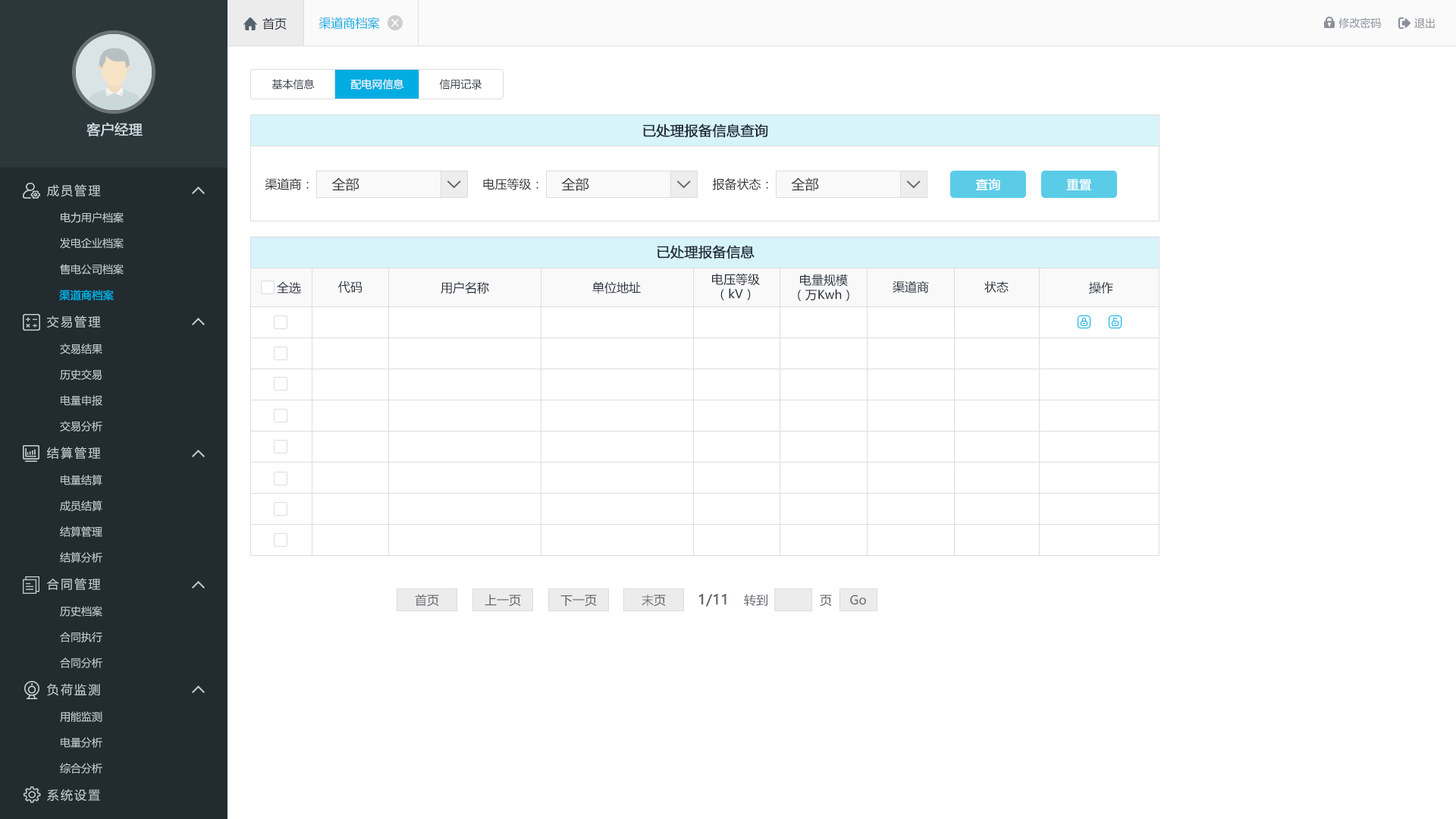
<style>
.page{position:relative;width:1456px;height:819px;background:#ffffff}
.page>*{position:absolute;margin:0}
.t1{font:12.1px "MicrosoftYaHei";color:#242e3b}
.t2{font:12.1px "MicrosoftYaHei";color:#00ace2}
.t3{font:10.6px "MicrosoftYaHei";color:#8a8f99}
.t4{font:10.6px "MicrosoftYaHei";color:#242e3b}
.t5{font:10.6px "MicrosoftYaHei";color:#ffffff}
.t6{font:13.6px "MicrosoftYaHei";color:#d1dce2;font-weight:bold}
.t7{font:13.6px "MicrosoftYaHei";color:#242e3b;font-weight:bold}
.t8{font:12.1px "MicrosoftYaHei";letter-spacing:0.14em;color:#c2cdd2}
.t9{font:12.1px "MicrosoftYaHei";color:#333333}
.t10{font:13.6px "MicrosoftYaHei";color:#333333}
.t11{font:12.1px "MicrosoftYaHei";color:#ffffff;font-weight:bold}
.t12{font:10.6px "MicrosoftYaHei";color:#c2cdd2}
.t13{font:10.6px "MicrosoftYaHei";color:#00ace2;font-weight:bold}
.t14{font:12.1px "MicrosoftYaHei";color:#61656b}
.t15{font:13.6px "MicrosoftYaHei";color:#61656b;font-weight:bold}
</style>
<div class="page">
<p class="t1" style="left:262px;top:17px;width:25px;height:13px">首页</p>
<p class="t2" style="left:318px;top:17px;width:62px;height:13px">渠道商档案</p>
<p class="t3" style="left:1338px;top:17px;width:43px;height:12px">修改密码</p>
<p class="t3" style="left:1414px;top:17px;width:21px;height:11px">退出</p>
<p class="t4" style="left:271px;top:79px;width:44px;height:10px">基本信息</p>
<p class="t5" style="left:350px;top:79px;width:54px;height:10px">配电网信息</p>
<p class="t4" style="left:439px;top:79px;width:43px;height:10px">信用记录</p>
<p class="t6" style="left:86px;top:122px;width:57px;height:14px">客户经理</p>
<p class="t7" style="left:643px;top:124px;width:125px;height:14px">已处理报备信息查询</p>
<p class="t8" style="left:47px;top:184px;width:54px;height:13px">成员管理</p>
<p class="t9" style="left:265px;top:178px;width:44px;height:12px">渠道商：</p>
<p class="t10" style="left:331px;top:177px;width:28px;height:14px">全部</p>
<p class="t9" style="left:483px;top:178px;width:55px;height:12px">电压等级：</p>
<p class="t10" style="left:561px;top:177px;width:28px;height:14px">全部</p>
<p class="t9" style="left:712px;top:178px;width:56px;height:12px">报备状态：</p>
<p class="t10" style="left:791px;top:177px;width:28px;height:14px">全部</p>
<p class="t11" style="left:975px;top:178px;width:25px;height:12px">查询</p>
<p class="t11" style="left:1066px;top:179px;width:26px;height:11px">重置</p>
<p class="t12" style="left:61px;top:212px;width:63px;height:11px">电力用户档案</p>
<p class="t12" style="left:60px;top:237px;width:64px;height:12px">发电企业档案</p>
<p class="t7" style="left:657px;top:245px;width:98px;height:14px">已处理报备信息</p>
<p class="t12" style="left:60px;top:264px;width:64px;height:11px">售电公司档案</p>
<p class="t1" style="left:277px;top:281px;width:24px;height:12px">全选</p>
<p class="t1" style="left:338px;top:281px;width:24px;height:12px">代码</p>
<p class="t1" style="left:441px;top:281px;width:48px;height:13px">用户名称</p>
<p class="t1" style="left:592px;top:281px;width:49px;height:13px">单位地址</p>
<p class="t1" style="left:712px;top:273px;width:48px;height:27px;text-align:center">电压等级<br>（kV）</p>
<p class="t1" style="left:798px;top:274px;width:51px;height:27px;text-align:center">电量规模<br>（万Kwh）</p>
<p class="t1" style="left:893px;top:281px;width:36px;height:12px">渠道商</p>
<p class="t1" style="left:984px;top:281px;width:25px;height:12px">状态</p>
<p class="t1" style="left:1089px;top:281px;width:24px;height:12px">操作</p>
<p class="t13" style="left:59px;top:290px;width:55px;height:11px">渠道商档案</p>
<p class="t8" style="left:47px;top:315px;width:54px;height:13px">交易管理</p>
<p class="t12" style="left:60px;top:344px;width:42px;height:10px">交易结果</p>
<p class="t12" style="left:60px;top:369px;width:42px;height:11px">历史交易</p>
<p class="t12" style="left:61px;top:395px;width:41px;height:11px">电量申报</p>
<p class="t12" style="left:60px;top:421px;width:42px;height:10px">交易分析</p>
<p class="t8" style="left:47px;top:447px;width:54px;height:13px">结算管理</p>
<p class="t12" style="left:61px;top:475px;width:41px;height:10px">电量结算</p>
<p class="t12" style="left:60px;top:500px;width:42px;height:11px">成员结算</p>
<p class="t12" style="left:60px;top:526px;width:42px;height:11px">结算管理</p>
<p class="t12" style="left:60px;top:552px;width:42px;height:11px">结算分析</p>
<p class="t8" style="left:47px;top:578px;width:54px;height:12px">合同管理</p>
<p class="t14" style="left:415px;top:594px;width:24px;height:13px">首页</p>
<p class="t14" style="left:642px;top:594px;width:24px;height:13px">末页</p>
<p class="t15" style="left:698px;top:594px;width:28px;height:13px">1/11</p>
<p class="t14" style="left:744px;top:594px;width:23px;height:12px">转到</p>
<p class="t12" style="left:60px;top:606px;width:42px;height:11px">历史档案</p>
<p class="t14" style="left:485px;top:595px;width:36px;height:12px">上一页</p>
<p class="t14" style="left:560px;top:595px;width:37px;height:12px">下一页</p>
<p class="t14" style="left:820px;top:595px;width:12px;height:12px">页</p>
<p class="t14" style="left:850px;top:595px;width:16px;height:10px">Go</p>
<p class="t12" style="left:60px;top:632px;width:42px;height:10px">合同执行</p>
<p class="t12" style="left:60px;top:657px;width:42px;height:11px">合同分析</p>
<p class="t8" style="left:47px;top:683px;width:53px;height:13px">负荷监测</p>
<p class="t12" style="left:60px;top:711px;width:42px;height:11px">用能监测</p>
<p class="t12" style="left:61px;top:737px;width:41px;height:11px">电量分析</p>
<p class="t12" style="left:60px;top:763px;width:42px;height:10px">综合分析</p>
<p class="t8" style="left:47px;top:789px;width:53px;height:13px">系统设置</p>
</div>
